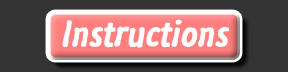
<style>
.page{position:relative;width:288px;height:72px;background:#333333}
.page>*{position:absolute;margin:0}
.t1{font:36.8px "SegoeMarker";color:#ffffff;font-weight:bold;font-style:italic}
</style>
<div class="page">
<p class="t1" style="left:62px;top:19px;width:167px;height:29px">Instructions</p>
</div>
